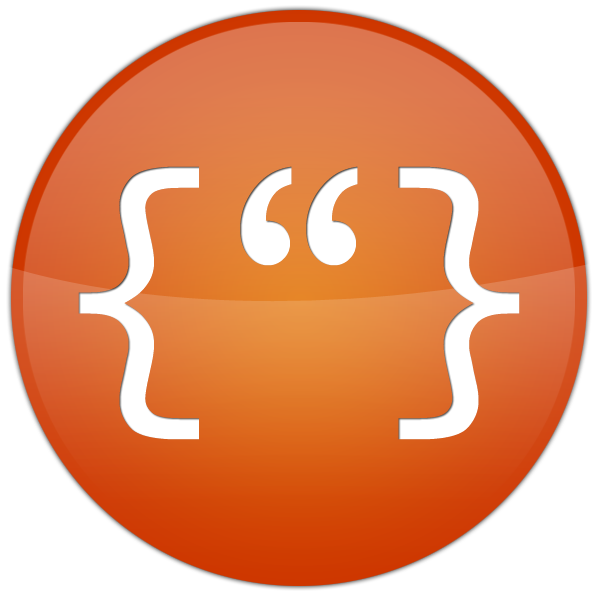
<style>
.page{position:relative;width:600px;height:600px;background:#ffffff}
.page>*{position:absolute;margin:0}
.t1{font:276.6px "Monaco";color:#ffffff}
</style>
<div class="page">
<p class="t1" style="left:78px;top:166px;width:442px;height:274px">{“}</p>
</div>
